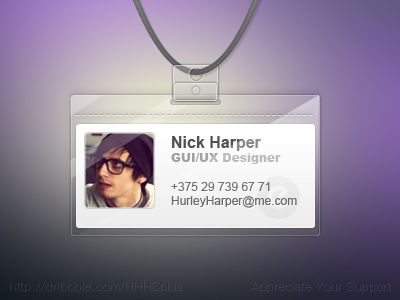
<style>
.page{position:relative;width:400px;height:300px}
.page>*{position:absolute;margin:0}
.t1{font:12px "ArialMT"}
.t2{font:16px "Arial-BoldMT"}
.t3{font:12px "Arial-Black"}
</style>
<div class="page">
<p class="t1" style="left:171px;top:136px;width:126px;height:72px"><span class="t2">Nick Harper<br></span><span class="t3">GUI/UX Designer <br><br></span>+375 29 739 67 71<br>HurleyHarper@me.com</p>
</div>
